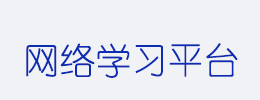
<style>
.page{position:relative;width:260px;height:100px;background:#f1f2f6}
.page>*{position:absolute;margin:0}
.t1{font:36px "YouYuan";color:#0c2db1}
</style>
<div class="page">
<p class="t1" style="left:26px;top:43px;width:212px;height:35px">网络学习平台</p>
</div>
